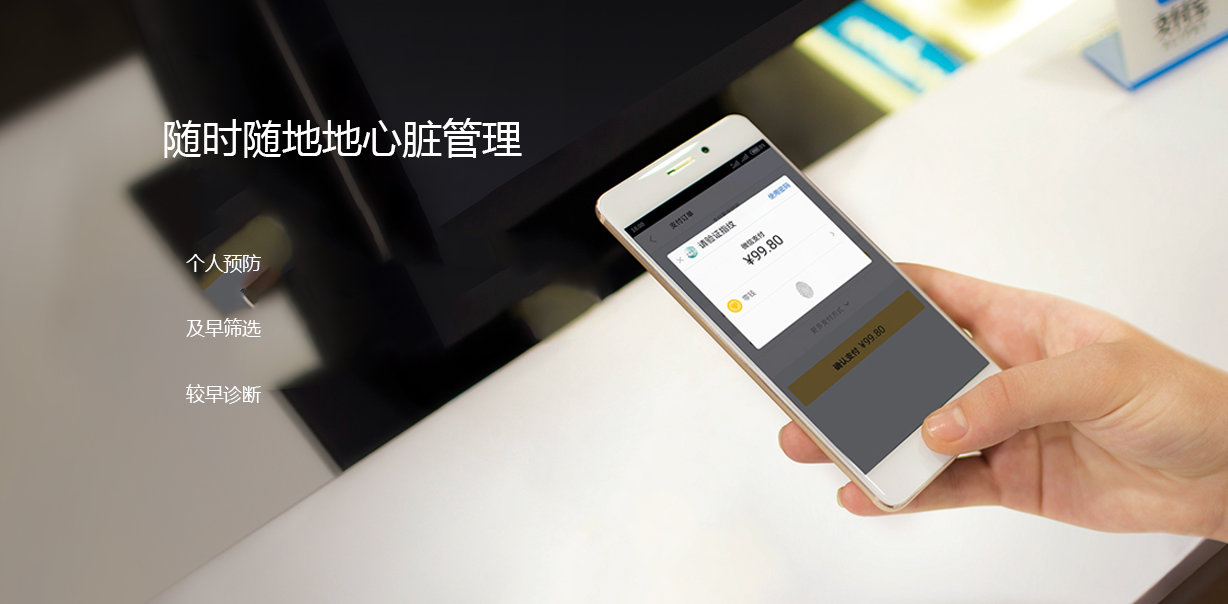
<style>
.page{position:relative;width:1228px;height:604px}
.page>*{position:absolute;margin:0}
.t1{font:40px "MicrosoftYaHei";color:#ffffff}
.t2{font:18.7px "MicrosoftYaHei";color:#ffffff}
</style>
<div class="page">
<p class="t1" style="left:164px;top:118px;width:358px;height:40px">随时随地地心脏管理</p>
<p class="t2" style="left:186px;top:254px;width:75px;height:150px">个人预防<br><br>及早筛选<br><br>较早诊断</p>
</div>
